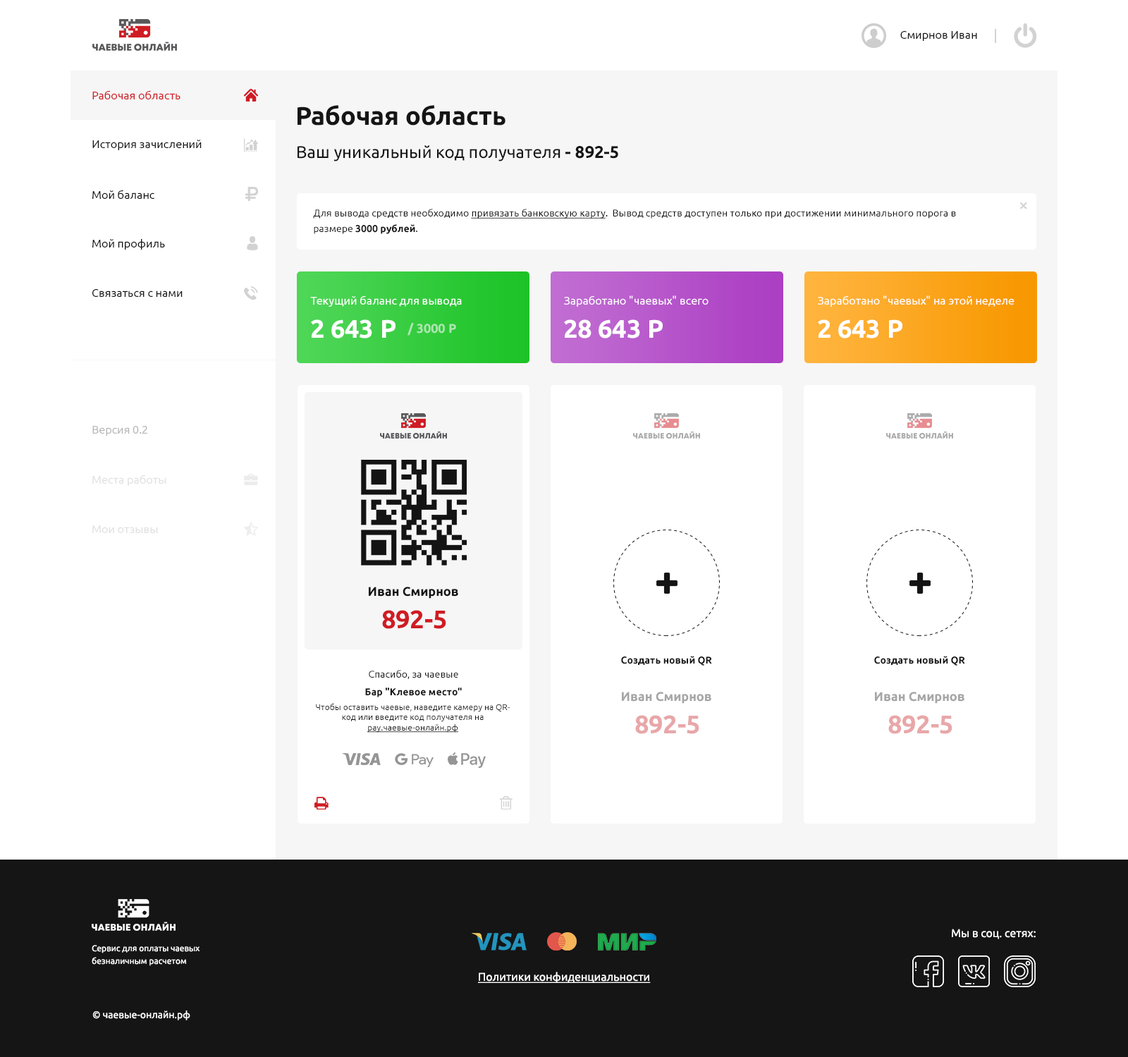
<style>
.page{position:relative;width:1128px;height:1057px;background:#ffffff}
.page>*{position:absolute;margin:0}
.t1{font:11.3px "Ubuntu-Regular";color:#151515}
.t2{font:11.3px "Ubuntu-Regular";color:#cf1c24}
.t3{font:25.4px "Ubuntu-Bold";color:#151515}
.t4{font:16.9px "Ubuntu-Regular";color:#151515}
.t5{font:16.9px "Ubuntu-Bold";color:#151515}
.t6{font:9.9px/15.5px "Ubuntu-Regular";color:#151515}
.t7{font:9.9px/15.5px "Ubuntu-Regular";color:#151515;text-decoration:underline}
.t8{font:9.9px/15.5px "Ubuntu-Bold";color:#151515}
.t9{font:11.3px "Ubuntu-Regular";color:#ffffff}
.t10{font:25.4px "Ubuntu-Bold";color:#ffffff}
.t11{font:12.7px "Ubuntu-Bold";color:#ade6af}
.t12{font:11.3px "Ubuntu-Regular";color:#b8b8b8}
.t13{font:11.3px "Ubuntu-Regular";color:#e1e1e1}
.t14{font:12.7px "Ubuntu-Bold";color:#151515}
.t15{font:25.4px "Ubuntu-Bold";color:#cf1c24}
.t16{font:9.9px "Ubuntu-Bold";color:#151515}
.t17{font:9.9px "Ubuntu-Regular";color:#151515}
.t18{font:12.7px "Ubuntu-Bold";color:#a6a6a6}
.t19{font:8.5px "Ubuntu-Regular";color:#151515}
.t20{font:8.5px "Ubuntu-Regular";color:#151515;text-decoration:underline}
.t21{font:25.4px "Ubuntu-Bold";color:#e8a7a9}
.t22{font:8.5px/6.3px "Ubuntu-Regular";color:#ffffff}
.t23{font:11.3px "Ubuntu-Regular";color:#ffffff;text-decoration:underline}
.t24{font:9.9px "Ubuntu-Regular";color:#ffffff}
</style>
<div class="page">
<p class="t1" style="left:900px;top:31px;width:77px;height:10px">Смирнов Иван</p>
<p class="t2" style="left:92px;top:90px;width:89px;height:9px">Рабочая область</p>
<p class="t3" style="left:298px;top:105px;width:208px;height:21px">Рабочая область</p>
<p class="t1" style="left:92px;top:140px;width:110px;height:10px">История зачислений</p>
<p class="t4" style="left:298px;top:145px;width:320px;height:16px">Ваш уникальный код получателя <span class="t5">- 892-5</span></p>
<p class="t1" style="left:92px;top:190px;width:62px;height:9px">Мой баланс</p>
<p class="t6" style="left:313px;top:209px;width:643px;height:25px">Для вывода средств необходимо <span class="t7">привязать банковскую карту</span>.  Вывод средств доступен только при достижении минимального порога в<br>размере <span class="t8">3000 рублей</span>.</p>
<p class="t1" style="left:92px;top:238px;width:73px;height:12px">Мой профиль</p>
<p class="t1" style="left:92px;top:289px;width:91px;height:8px">Связаться с нами</p>
<p class="t9" style="left:310px;top:295px;width:152px;height:12px">Текущий баланс для вывода</p>
<p class="t9" style="left:564px;top:295px;width:145px;height:12px">Заработано "чаевых" всего</p>
<p class="t9" style="left:818px;top:295px;width:197px;height:12px">Заработано "чаевых" на этой неделе</p>
<p class="t10" style="left:311px;top:319px;width:85px;height:19px">2 643 Р</p>
<p class="t11" style="left:408px;top:323px;width:48px;height:13px">/ 3000 Р</p>
<p class="t10" style="left:564px;top:319px;width:99px;height:19px">28 643 Р</p>
<p class="t10" style="left:818px;top:319px;width:85px;height:19px">2 643 Р</p>
<p class="t12" style="left:92px;top:426px;width:55px;height:10px">Версия 0.2</p>
<p class="t13" style="left:92px;top:475px;width:74px;height:11px">Места работы</p>
<p class="t13" style="left:92px;top:525px;width:66px;height:8px">Мои отзывы</p>
<p class="t14" style="left:369px;top:587px;width:89px;height:12px">Иван Смирнов</p>
<p class="t15" style="left:382px;top:610px;width:64px;height:19px">892-5</p>
<p class="t16" style="left:621px;top:656px;width:91px;height:10px">Создать новый QR</p>
<p class="t16" style="left:874px;top:656px;width:91px;height:10px">Создать новый QR</p>
<p class="t17" style="left:369px;top:670px;width:89px;height:10px">Спасибо, за чаевые</p>
<p class="t16" style="left:365px;top:687px;width:97px;height:10px">Бар "Клевое место"</p>
<p class="t18" style="left:622px;top:692px;width:89px;height:12px">Иван Смирнов</p>
<p class="t18" style="left:875px;top:692px;width:90px;height:12px">Иван Смирнов</p>
<p class="t19" style="left:316px;top:703px;width:194px;height:30px;text-align:center">Чтобы оставить чаевые, наведите камеру на QR-<br>код или введите код получателя на<br><span class="t20">pay.чаевые-онлайн.рф</span></p>
<p class="t21" style="left:635px;top:715px;width:64px;height:19px">892-5</p>
<p class="t21" style="left:888px;top:715px;width:65px;height:19px">892-5</p>
<p class="t9" style="left:952px;top:929px;width:84px;height:10px">Мы в соц. сетях:</p>
<p class="t22" style="left:92px;top:945px;width:108px;height:21px">Сервис для оплаты чаевых<br><br>безналичным расчетом</p>
<p class="t23" style="left:478px;top:972px;width:173px;height:11px">Политики конфиденциальности</p>
<p class="t24" style="left:92px;top:1010px;width:98px;height:10px">© чаевые-онлайн.рф</p>
</div>
